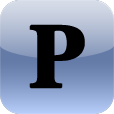
<style>
.page{position:relative;width:114px;height:114px}
.page>*{position:absolute;margin:0}
.t1{font:90px "Times-Bold";color:#010101;font-weight:bold}
</style>
<div class="page">
<p class="t1" style="left:29px;top:24px;width:56px;height:65px">P</p>
</div>
